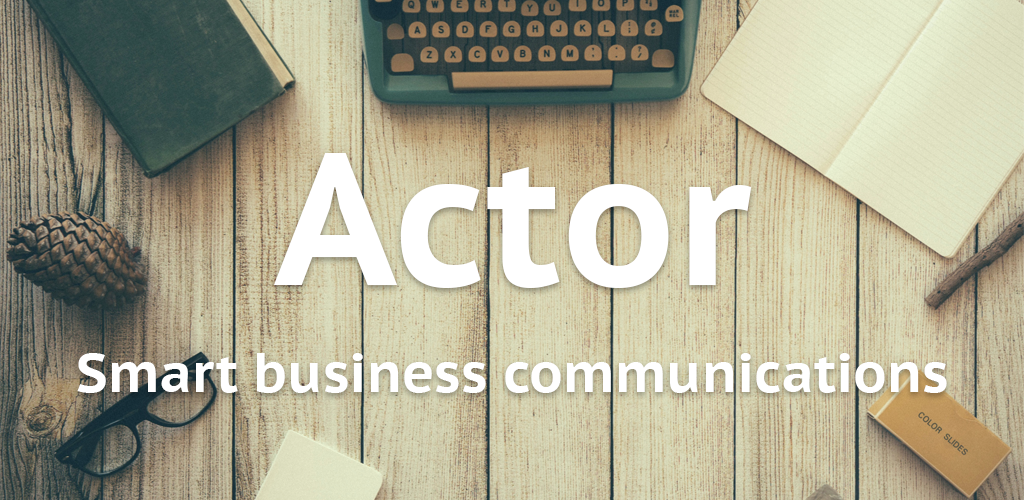
<style>
.page{position:relative;width:1024px;height:500px}
.page>*{position:absolute;margin:0}
.t1{font:187px "PTSans-CaptionBold";color:#ffffff}
.t2{font:55px "PTSans-CaptionBold";color:#ffffff}
</style>
<div class="page">
<p class="t1" style="left:274px;top:153px;width:478px;height:135px">Actor</p>
<p class="t2" style="left:77px;top:353px;width:870px;height:40px">Smart business communications</p>
</div>
